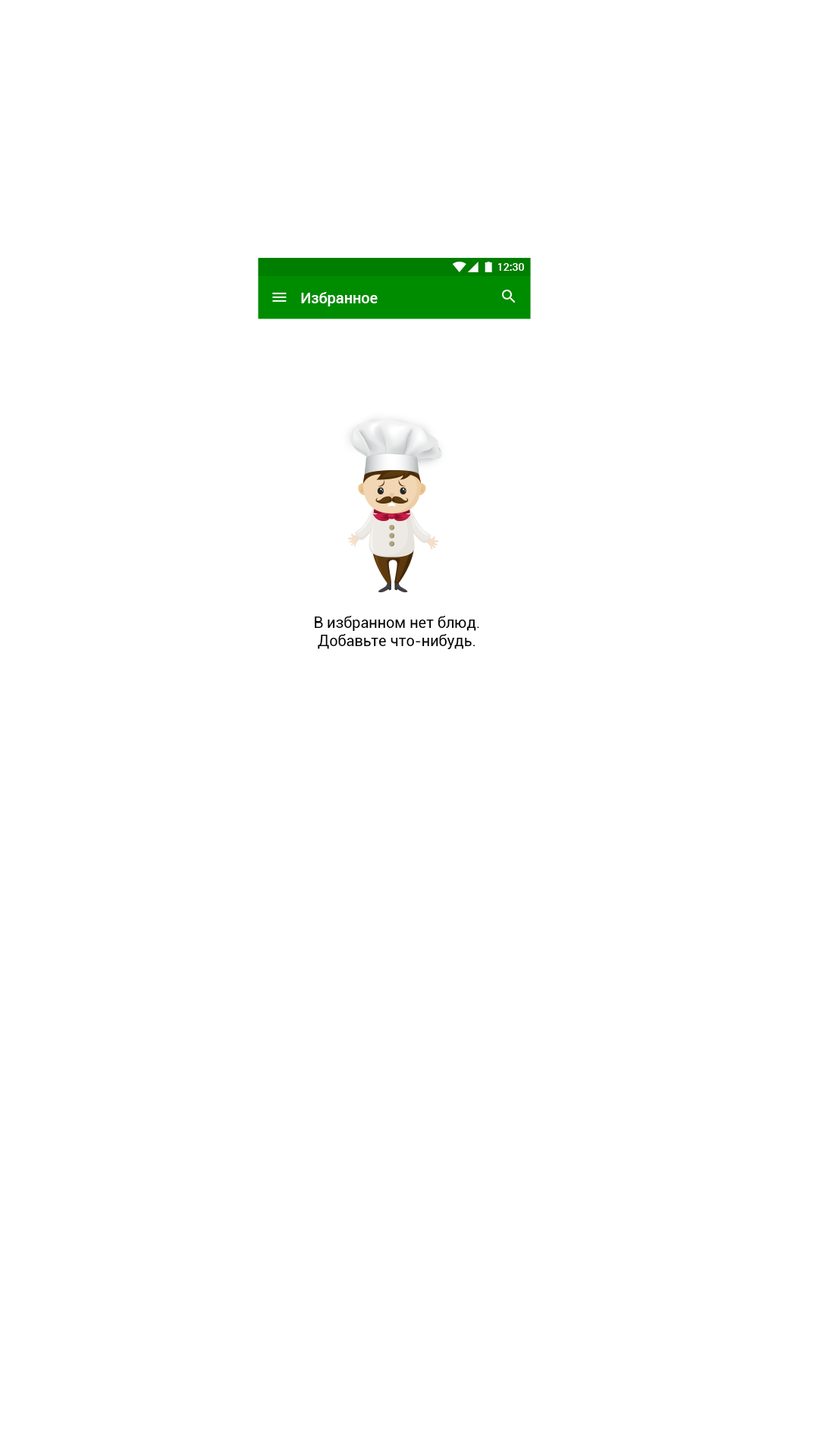
<style>
.page{position:relative;width:819px;height:1456px;background:#ffffff}
.page>*{position:absolute;margin:0}
.t1{font:10.6px "Roboto-Medium";color:#ffffff}
.t2{font:15.1px "Roboto-Medium";color:#ffffff}
.t3{font:15.1px "Roboto-Regular";color:#000000}
</style>
<div class="page">
<p class="t1" style="left:497px;top:263px;width:27px;height:8px">12:30</p>
<p class="t2" style="left:301px;top:292px;width:77px;height:14px">Избранное</p>
<p class="t3" style="left:315px;top:616px;width:164px;height:33px;text-align:center">В избранном нет блюд.<br>Добавьте что-нибудь.</p>
</div>
